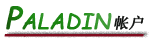
<style>
.page{position:relative;width:150px;height:40px;background:#ffffff}
.page>*{position:absolute;margin:0}
.t1{font:30px "ComicSansMS";color:#1c8a13;font-variant:small-caps;font-weight:bold;font-style:italic}
.t2{font:15px "SimSun";color:#0d0f0d;font-variant:small-caps;font-weight:bold;font-style:italic}
.t3{font:30px "ComicSansMS";color:#800c1f;font-variant:small-caps;font-weight:bold;font-style:italic}
</style>
<div class="page">
<p class="t1" style="left:6px;top:6px;width:106px;height:24px">Paladin</p>
<p class="t2" style="left:114px;top:15px;width:30px;height:15px">帐户</p>
<p class="t3" style="left:4px;top:34px;width:140px;height:3px">_______</p>
</div>
